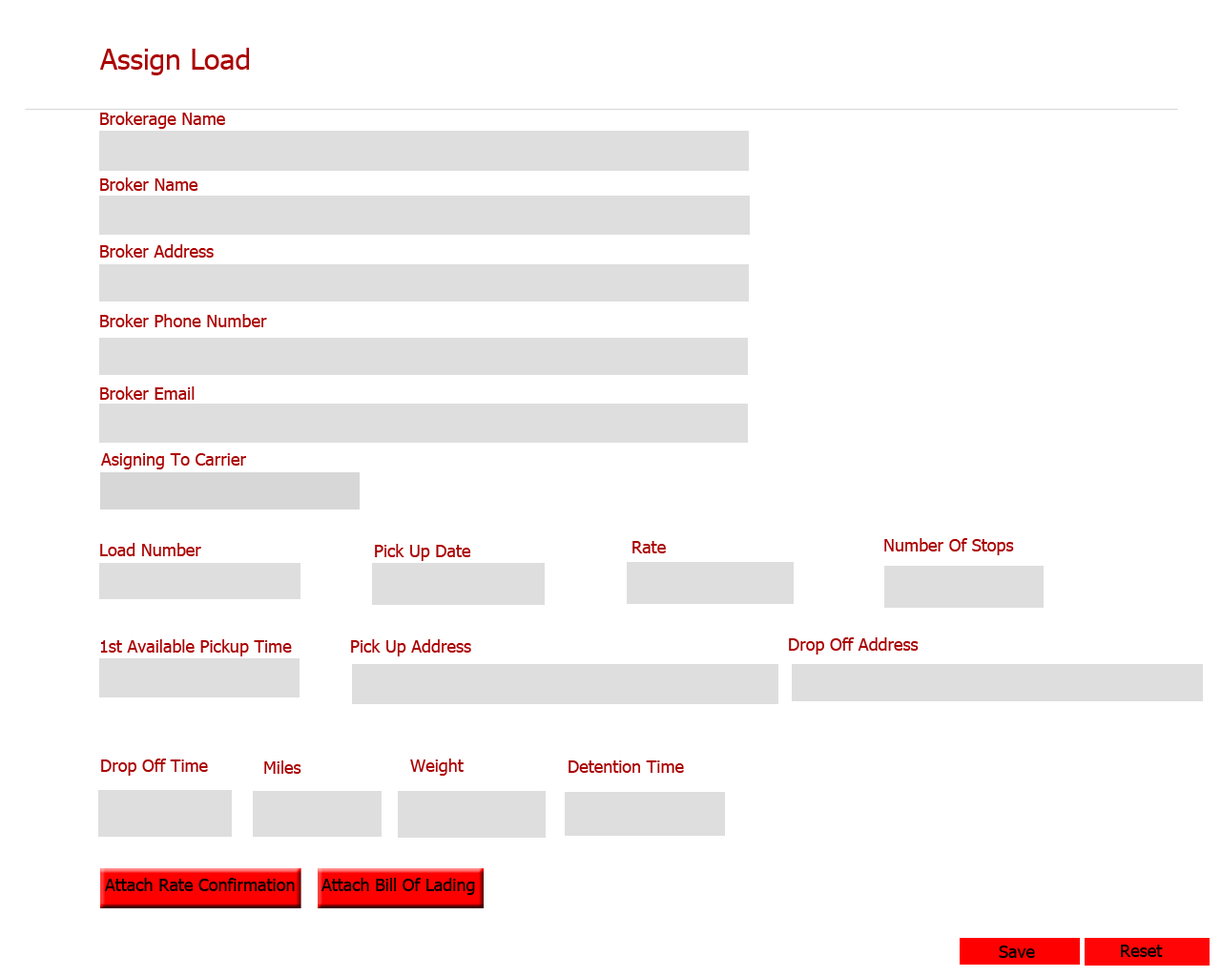
<style>
.page{position:relative;width:1221px;height:977px;background:#ffffff}
.page>*{position:absolute;margin:0}
.t1{font:28.6px "Tahoma";color:#ab0000}
.t2{font:17.2px "Tahoma";color:#ab0000}
.t3{font:17.2px "Tahoma";color:#000000}
</style>
<div class="page">
<p class="t1" style="left:100px;top:48px;width:149px;height:27px">Assign Load</p>
<p class="t2" style="left:100px;top:112px;width:125px;height:17px">Brokerage Name</p>
<p class="t2" style="left:100px;top:177px;width:98px;height:14px">Broker Name</p>
<p class="t2" style="left:100px;top:244px;width:114px;height:14px">Broker Address</p>
<p class="t2" style="left:100px;top:314px;width:167px;height:13px">Broker Phone Number</p>
<p class="t2" style="left:100px;top:386px;width:95px;height:14px">Broker Email</p>
<p class="t2" style="left:101px;top:453px;width:145px;height:16px">Asigning To Carrier</p>
<p class="t2" style="left:100px;top:543px;width:101px;height:13px">Load Number</p>
<p class="t2" style="left:375px;top:544px;width:96px;height:17px">Pick Up Date</p>
<p class="t2" style="left:632px;top:541px;width:34px;height:12px">Rate</p>
<p class="t2" style="left:884px;top:538px;width:130px;height:17px">Number Of Stops</p>
<p class="t2" style="left:100px;top:639px;width:192px;height:17px">1st Available Pickup Time</p>
<p class="t2" style="left:351px;top:639px;width:120px;height:17px">Pick Up Address</p>
<p class="t2" style="left:789px;top:637px;width:130px;height:17px">Drop Off Address</p>
<p class="t2" style="left:101px;top:758px;width:107px;height:17px">Drop Off Time</p>
<p class="t2" style="left:264px;top:760px;width:37px;height:14px">Miles</p>
<p class="t2" style="left:410px;top:758px;width:54px;height:17px">Weight</p>
<p class="t2" style="left:568px;top:760px;width:116px;height:13px">Detention Time</p>
<p class="t3" style="left:105px;top:878px;width:190px;height:13px">Attach Rate Confirmation</p>
<p class="t3" style="left:321px;top:878px;width:154px;height:17px">Attach Bill Of Lading</p>
<p class="t3" style="left:999px;top:945px;width:36px;height:13px">Save</p>
<p class="t3" style="left:1121px;top:944px;width:42px;height:13px">Reset</p>
</div>
